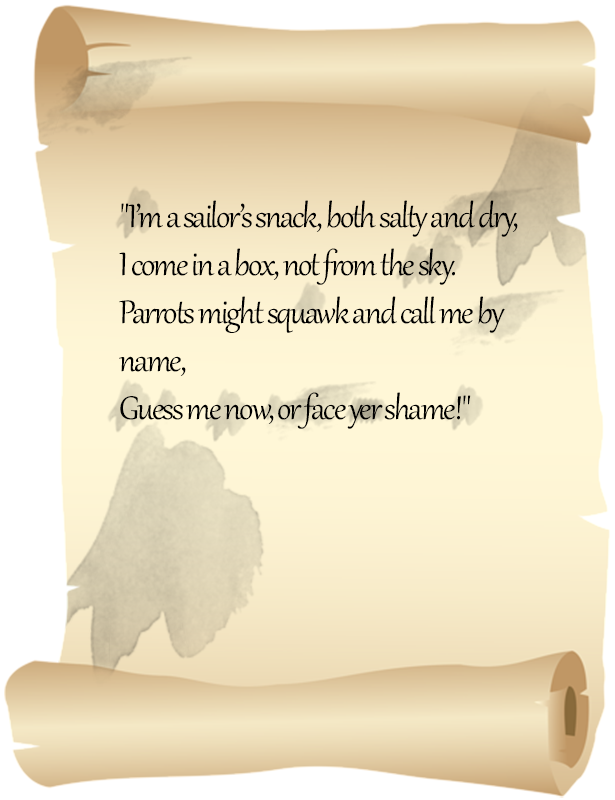
<style>
.page{position:relative;width:615px;height:800px}
.page>*{position:absolute;margin:0}
.t1{font:40px "Gabriola";letter-spacing:-0.05em;color:#000000}
</style>
<div class="page">
<p class="t1" style="left:119px;top:200px;width:399px;height:229px">"I’m a sailor’s snack, both salty and dry,<br>I come in a box, not from the sky.<br>Parrots might squawk and call me by name,<br>Guess me now, or face yer shame!"</p>
</div>
